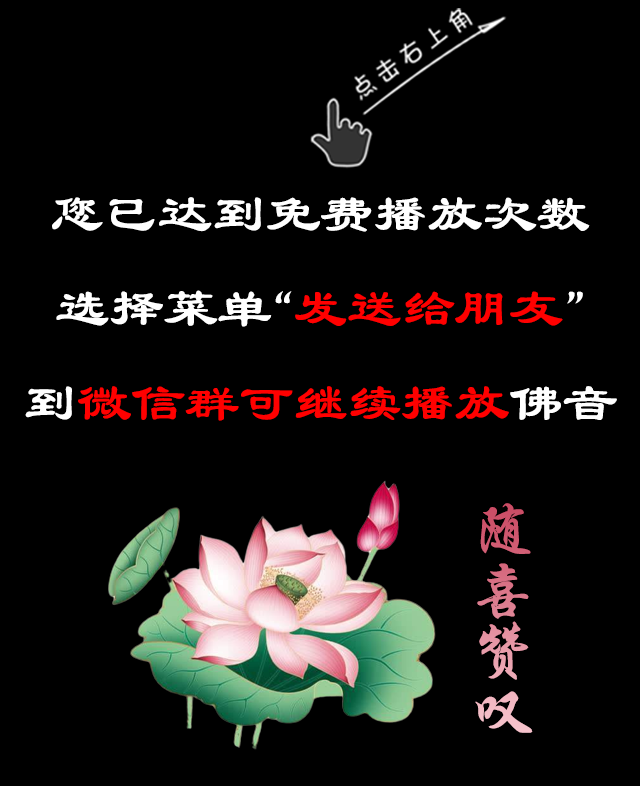
<style>
.page{position:relative;width:640px;height:786px;background:#000000}
.page>*{position:absolute;margin:0}
.t1{font:54px "STBaoliTC-Regular";color:#ffffff}
.t2{font:54px "STBaoliTC-Regular";color:#ff0000}
.t3{font:60px/60px "STXingkaiSC-Bold"}
</style>
<div class="page">
<p class="t1" style="left:25px;top:197px;width:592px;height:224px;text-align:center">您已达到免费播放次数<br>选择菜单“<span class="t2">发送给朋友</span>”<br>到<span class="t2">微信群可继续播放</span>佛音</p>
<p class="t3" style="left:475px;top:503px;width:58px;height:230px;text-align:center">随<br>喜<br>赞<br>叹</p>
</div>
